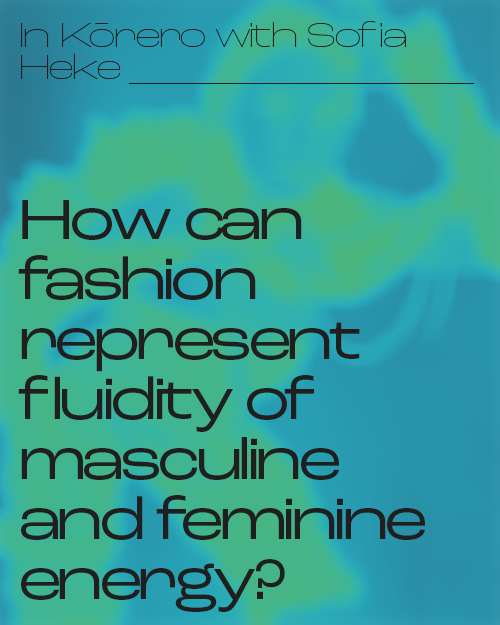
<style>
.page{position:relative;width:500px;height:625px}
.page>*{position:absolute;margin:0}
.t1{font:60px/60px "RocGrotesk-Wide";letter-spacing:-0.075em;color:#1f1f1f}
.t2{font:36px/32px "RocGrotesk-WideThin";letter-spacing:-0.075em;color:#1f1f1f}
</style>
<div class="page">
<p class="t1" style="left:18px;top:21px;width:456px;height:591px"><span class="t2">In Kōrero with Sofia Heke _____________<br></span><br>How can fashion represent fluidity of masculine and feminine energy?</p>
</div>
